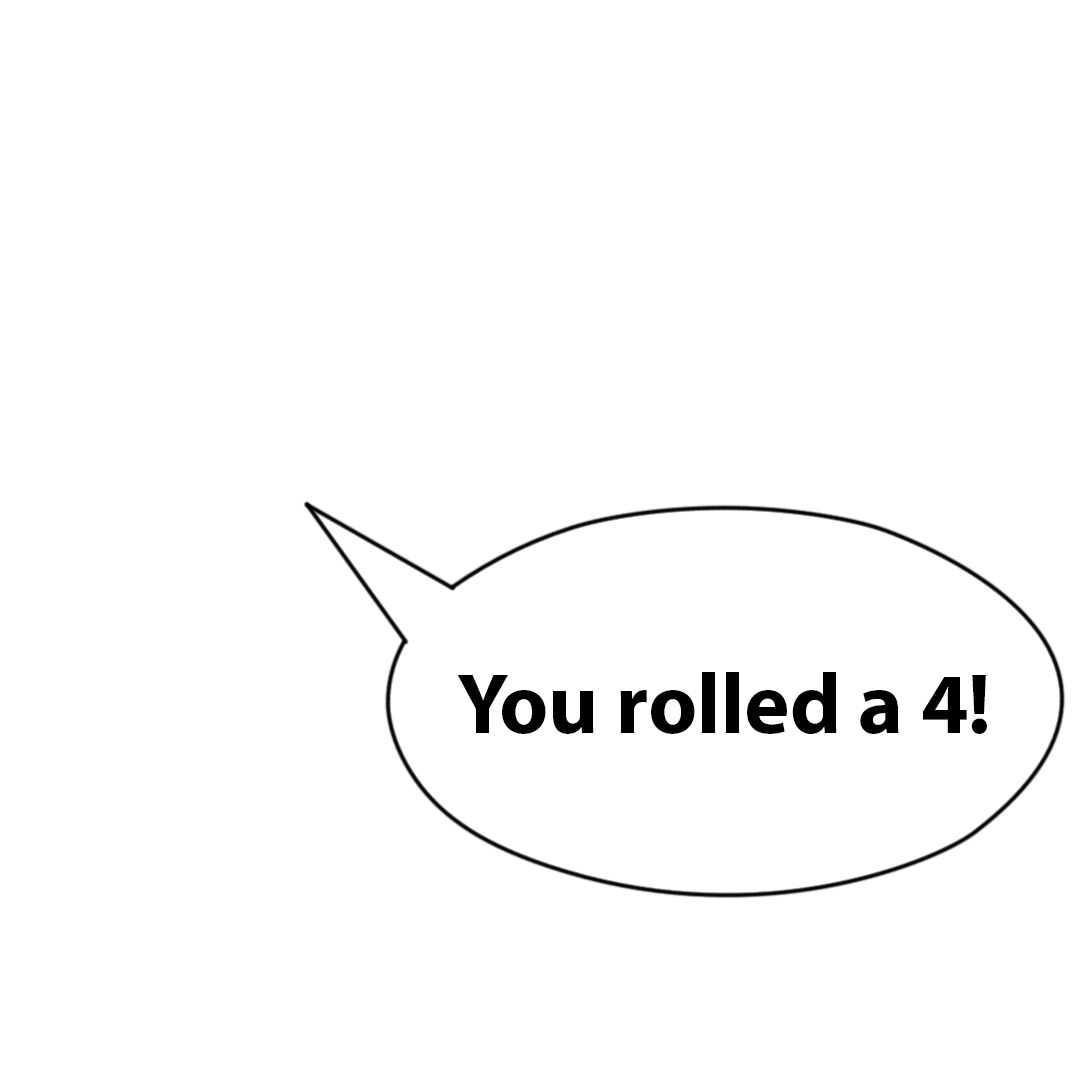
<style>
.page{position:relative;width:1089px;height:1089px;background:#ffffff}
.page>*{position:absolute;margin:0}
.t1{font:85.8px "MyriadPro-Bold";color:#000000}
</style>
<div class="page">
<p class="t1" style="left:457px;top:672px;width:530px;height:62px">You rolled a 4!</p>
</div>
